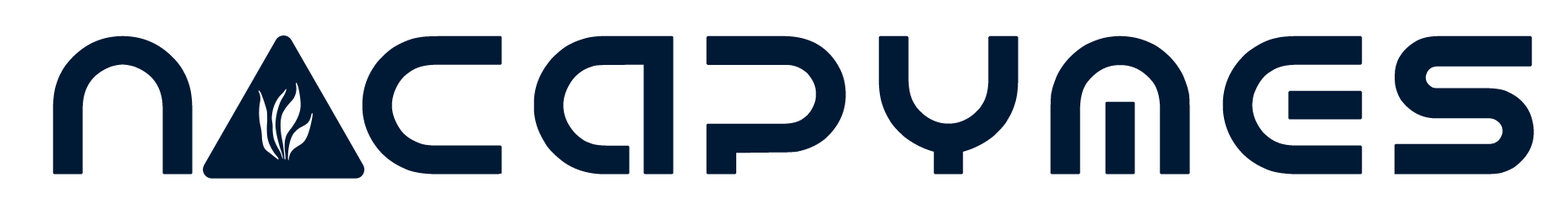
<style>
.page{position:relative;width:1568px;height:199px;background:#ffffff}
.page>*{position:absolute;margin:0}
.t1{font:193.7px "Android";letter-spacing:0.08em;color:#001935;font-weight:bold}
</style>
<div class="page">
<p class="t1" style="left:52px;top:36px;width:1482px;height:139px">N  caPymes</p>
</div>
